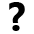
<style>
.page{position:relative;width:34px;height:34px;background:#ffffff}
.page>*{position:absolute;margin:0}
.t1{font:40px "MicrosoftTaiLe-Bold";color:#000000}
</style>
<div class="page">
<p class="t1" style="left:9px;top:2px;width:16px;height:29px">?</p>
</div>
